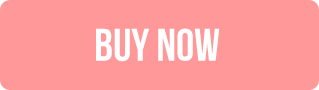
<style>
.page{position:relative;width:319px;height:90px;background:#ff9999}
.page>*{position:absolute;margin:0}
.t1{font:45.8px "BebasNeue";color:#ffffff}
</style>
<div class="page">
<p class="t1" style="left:96px;top:28px;width:124px;height:34px">buy now</p>
</div>
